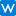
<style>
.page{position:relative;width:16px;height:16px;background:#007dd5}
.page>*{position:absolute;margin:0}
.t1{font:14px "TwCenMT-Regular";color:#ffffff}
</style>
<div class="page">
<p class="t1" style="left:1px;top:4px;width:14px;height:9px">W</p>
</div>
